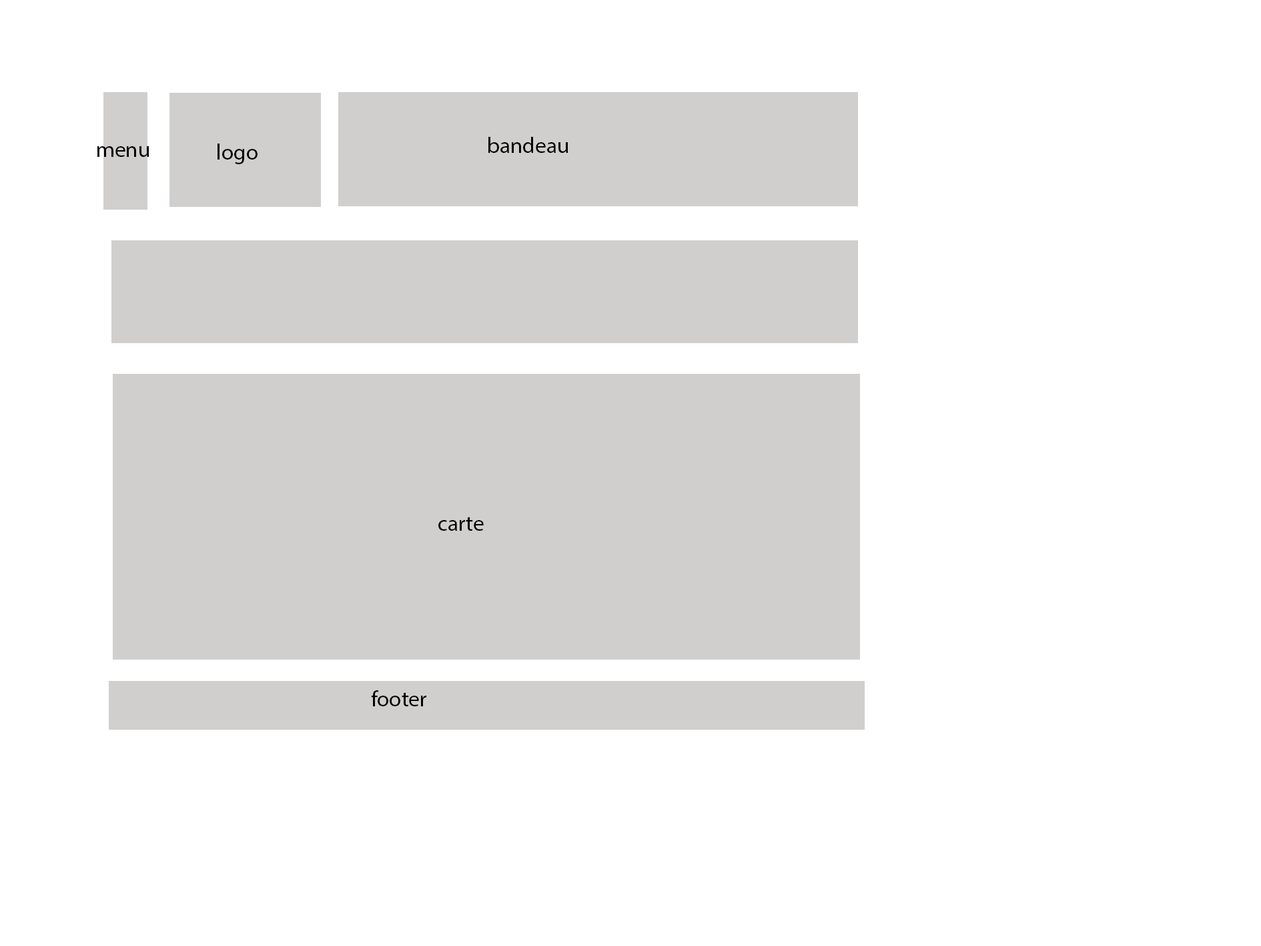
<style>
.page{position:relative;width:1261px;height:946px;background:#ffffff}
.page>*{position:absolute;margin:0}
.t1{font:22.2px "MyriadPro-Regular";color:#000000}
</style>
<div class="page">
<p class="t1" style="left:488px;top:137px;width:80px;height:16px">bandeau</p>
<p class="t1" style="left:97px;top:146px;width:52px;height:11px">menu</p>
<p class="t1" style="left:218px;top:143px;width:40px;height:21px">logo</p>
<p class="t1" style="left:438px;top:516px;width:46px;height:14px">carte</p>
<p class="t1" style="left:371px;top:690px;width:55px;height:16px">footer</p>
</div>
